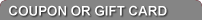
<style>
.page{position:relative;width:202px;height:20px;background:#858585}
.page>*{position:absolute;margin:0}
.t1{font:13.3px "Arial-BoldMT";color:#ffffff}
</style>
<div class="page">
<p class="t1" style="left:9px;top:5px;width:158px;height:11px">COUPON OR GIFT CARD</p>
</div>
